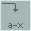
<style>
.page{position:relative;width:31px;height:31px;background:#a7b6b5}
.page>*{position:absolute;margin:0}
.t1{font:10px "rktr6cd";color:#3e6764}
</style>
<div class="page">
<p class="t1" style="left:8px;top:23px;width:15px;height:5px">a-x</p>
</div>
